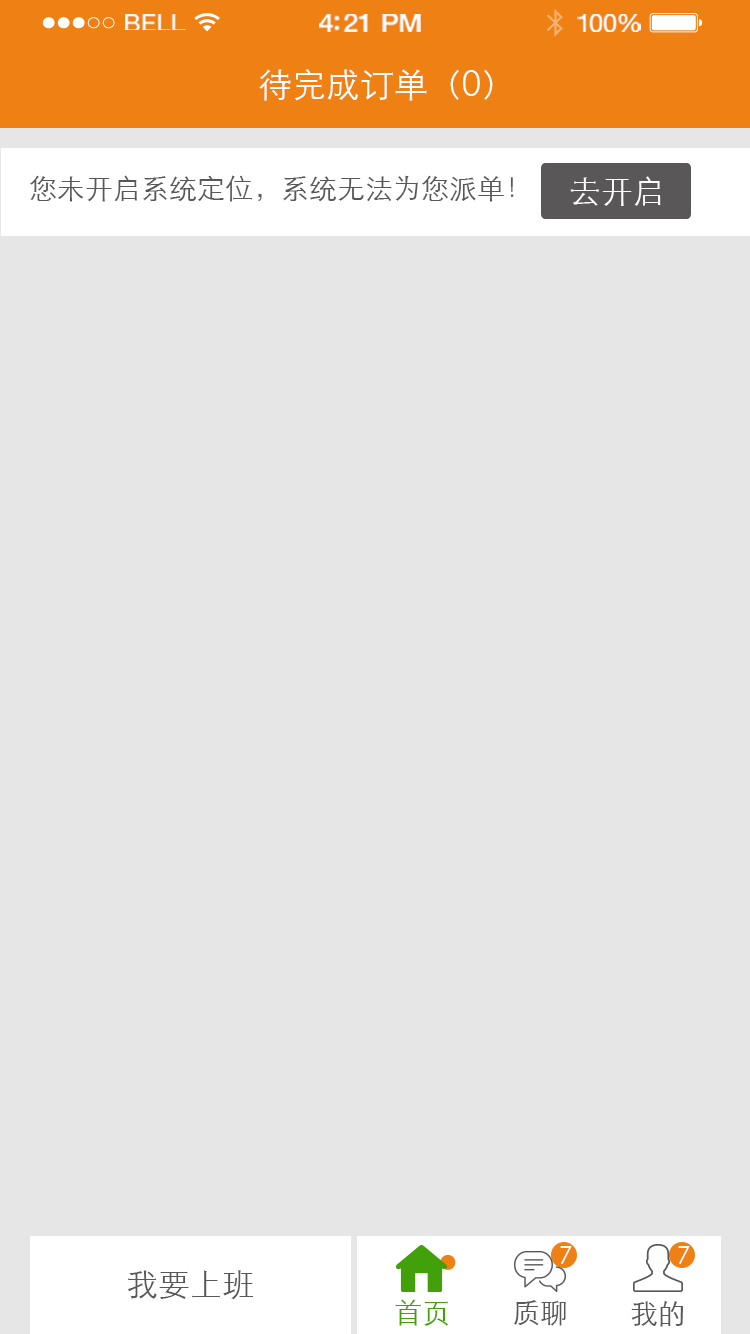
<style>
.page{position:relative;width:750px;height:1334px;background:#e6e6e6}
.page>*{position:absolute;margin:0}
.t1{font:23.3px "HelveticaNeue";letter-spacing:0.02em;color:#ffffff;scale:1.06 1}
.t2{font:25.3px "HelveticaNeue-Medium";letter-spacing:-0.02em;color:#ffffff;scale:1.06 1}
.t3{font:24.3px "HelveticaNeue";letter-spacing:-0.02em;color:#ffffff;scale:1.06 1}
.t4{font:34px "STXihei";color:#ffffff}
.t5{font:28px "STXihei";color:#595757}
.t6{font:32px "STXihei";color:#ffffff}
.t7{font:24px "STXihei";color:#ffffff}
.t8{font:32px "STXihei";color:#595757}
.t9{font:28px "STXihei";color:#42a00a}
</style>
<div class="page">
<p class="t1" style="left:125px;top:14px;width:61px;height:16px">BELL</p>
<p class="t2" style="left:319px;top:14px;width:102px;height:18px">4:21 PM</p>
<p class="t3" style="left:577px;top:14px;width:64px;height:18px">100%</p>
<p class="t4" style="left:259px;top:69px;width:234px;height:32px">待完成订单（0）</p>
<p class="t5" style="left:30px;top:175px;width:484px;height:27px">您未开启系统定位，系统无法为您派单！</p>
<p class="t6" style="left:570px;top:176px;width:91px;height:30px">去开启</p>
<p class="t7" style="left:560px;top:1246px;width:12px;height:18px">7</p>
<p class="t7" style="left:678px;top:1246px;width:12px;height:18px">7</p>
<p class="t8" style="left:128px;top:1270px;width:125px;height:30px">我要上班</p>
<p class="t9" style="left:395px;top:1299px;width:53px;height:27px">首页</p>
<p class="t5" style="left:514px;top:1300px;width:52px;height:26px">质聊</p>
<p class="t5" style="left:631px;top:1301px;width:53px;height:26px">我的</p>
</div>
